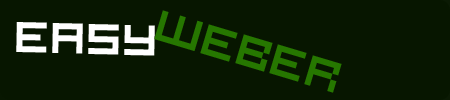
<style>
.page{position:relative;width:450px;height:100px;background:#071600}
.page>*{position:absolute;margin:0}
.t1{font:48px "Hooge0853";color:#267700}
.t2{font:48px "Hooge0853";color:#ffffff}
</style>
<div class="page">
<p class="t1" style="left:154px;top:10px;width:188px;height:83px;rotate:17deg">WEBER</p>
<p class="t2" style="left:16px;top:22px;width:139px;height:34px;rotate:1deg">Easy</p>
</div>
